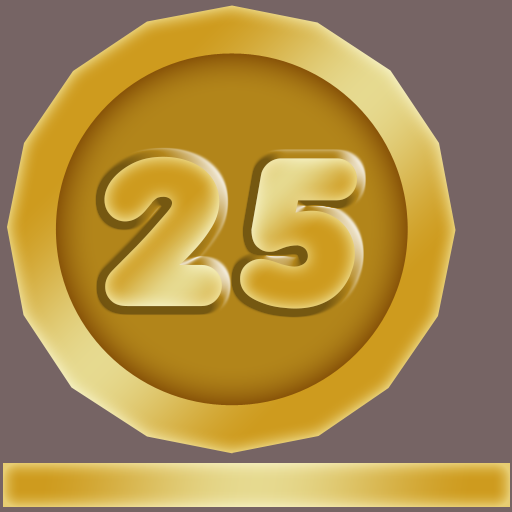
<style>
.page{position:relative;width:512px;height:512px;background:#766464}
.page>*{position:absolute;margin:0}
.t1{font:203px "Anja-Eliane-Nornal"}
</style>
<div class="page">
<p class="t1" style="left:104px;top:156px;width:254px;height:153px">25</p>
</div>
